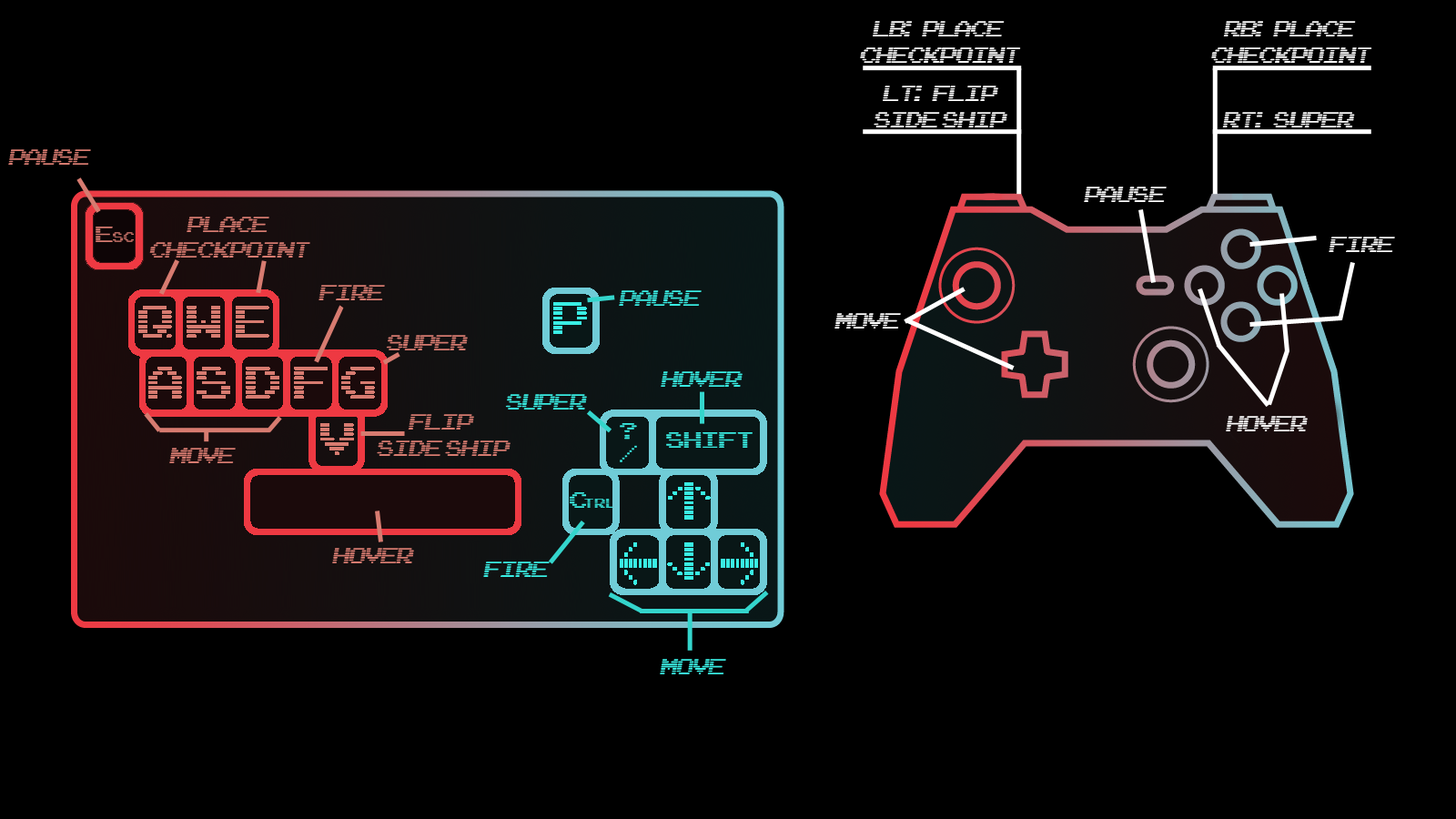
<style>
.page{position:relative;width:1456px;height:819px;background:#000000}
.page>*{position:absolute;margin:0}
.t1{font:21.8px "GalagansIslandFont";letter-spacing:-0.05em;color:#ffffff;font-style:italic}
.t2{font:21.8px "GalagansIslandFont";letter-spacing:-0.05em;color:#d77b70;font-style:italic}
.t3{font:21.8px "GalagansIslandFont";letter-spacing:-0.05em;color:#39eee4;font-style:italic}
</style>
<div class="page">
<p class="t1" style="left:860px;top:21px;width:161px;height:42px;text-align:center">LB:   PLACE <br>CHECKPOINT</p>
<p class="t1" style="left:1211px;top:21px;width:161px;height:42px;text-align:center">RB:   PLACE <br>CHECKPOINT</p>
<p class="t1" style="left:874px;top:86px;width:133px;height:41px;text-align:center">LT:   FLIP<br>SIDE SHIP</p>
<p class="t1" style="left:1222px;top:112px;width:133px;height:15px">RT:   SUPER</p>
<p class="t2" style="left:8px;top:149px;width:83px;height:16px">PAUSE</p>
<p class="t1" style="left:1084px;top:187px;width:83px;height:15px">PAUSE</p>
<p class="t2" style="left:149px;top:217px;width:161px;height:41px;text-align:center">PLACE <br>CHECKPOINT</p>
<p class="t1" style="left:1329px;top:237px;width:66px;height:15px">FIRE</p>
<p class="t2" style="left:318px;top:285px;width:67px;height:15px">FIRE</p>
<p class="t3" style="left:619px;top:290px;width:83px;height:16px">PAUSE</p>
<p class="t1" style="left:834px;top:313px;width:67px;height:16px">MOVE</p>
<p class="t2" style="left:386px;top:335px;width:82px;height:15px">SUPER</p>
<p class="t3" style="left:661px;top:371px;width:82px;height:16px">HOVER</p>
<p class="t3" style="left:505px;top:394px;width:82px;height:15px">SUPER</p>
<p class="t2" style="left:377px;top:414px;width:134px;height:42px;text-align:center">FLIP <br>SIDE SHIP</p>
<p class="t1" style="left:1226px;top:416px;width:82px;height:15px">HOVER</p>
<p class="t2" style="left:169px;top:448px;width:67px;height:15px">MOVE</p>
<p class="t2" style="left:332px;top:548px;width:82px;height:15px">HOVER</p>
<p class="t3" style="left:483px;top:561px;width:67px;height:16px">FIRE</p>
<p class="t3" style="left:660px;top:659px;width:66px;height:15px">MOVE</p>
</div>
